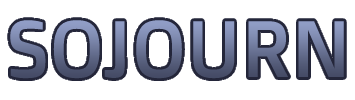
<style>
.page{position:relative;width:355px;height:100px;background:#ffffff}
.page>*{position:absolute;margin:0}
.t1{font:80px "DoppioOne-Regular"}
</style>
<div class="page">
<p class="t1" style="left:10px;top:20px;width:334px;height:59px">SOJOURN</p>
</div>
